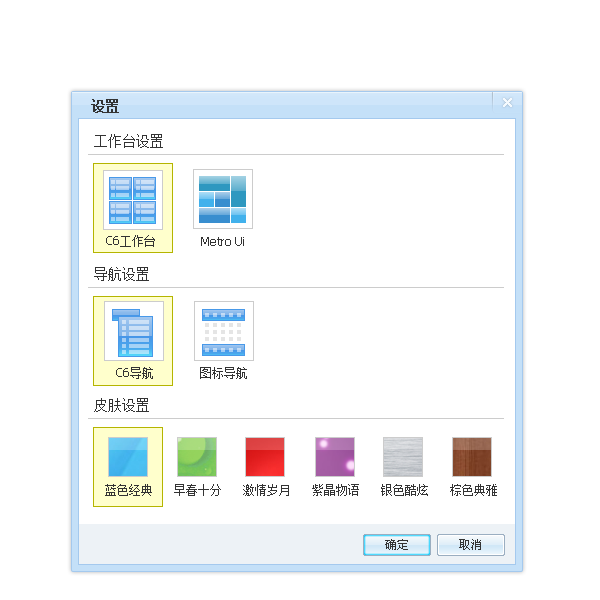
<style>
.page{position:relative;width:600px;height:600px;background:#ffffff}
.page>*{position:absolute;margin:0}
.t1{font:14px "Tahoma-Bold";color:#333333}
.t2{font:14px "Tahoma";color:#333333}
.t3{font:12px "Tahoma";color:#333333}
</style>
<div class="page">
<p class="t1" style="left:91px;top:99px;width:28px;height:14px">设置</p>
<p class="t2" style="left:94px;top:134px;width:69px;height:14px">工作台设置</p>
<p class="t3" style="left:106px;top:235px;width:49px;height:12px">C6工作台</p>
<p class="t3" style="left:201px;top:237px;width:43px;height:9px">Metro Ui</p>
<p class="t2" style="left:94px;top:267px;width:55px;height:14px">导航设置</p>
<p class="t3" style="left:116px;top:367px;width:37px;height:12px">C6导航</p>
<p class="t3" style="left:200px;top:367px;width:47px;height:12px">图标导航</p>
<p class="t2" style="left:94px;top:398px;width:55px;height:14px">皮肤设置</p>
<p class="t3" style="left:105px;top:484px;width:47px;height:12px">蓝色经典</p>
<p class="t3" style="left:174px;top:484px;width:47px;height:12px">早春十分</p>
<p class="t3" style="left:243px;top:484px;width:46px;height:12px">激情岁月</p>
<p class="t3" style="left:312px;top:484px;width:47px;height:12px">紫晶物语</p>
<p class="t3" style="left:381px;top:484px;width:47px;height:12px">银色酷炫</p>
<p class="t3" style="left:450px;top:484px;width:47px;height:12px">棕色典雅</p>
</div>
